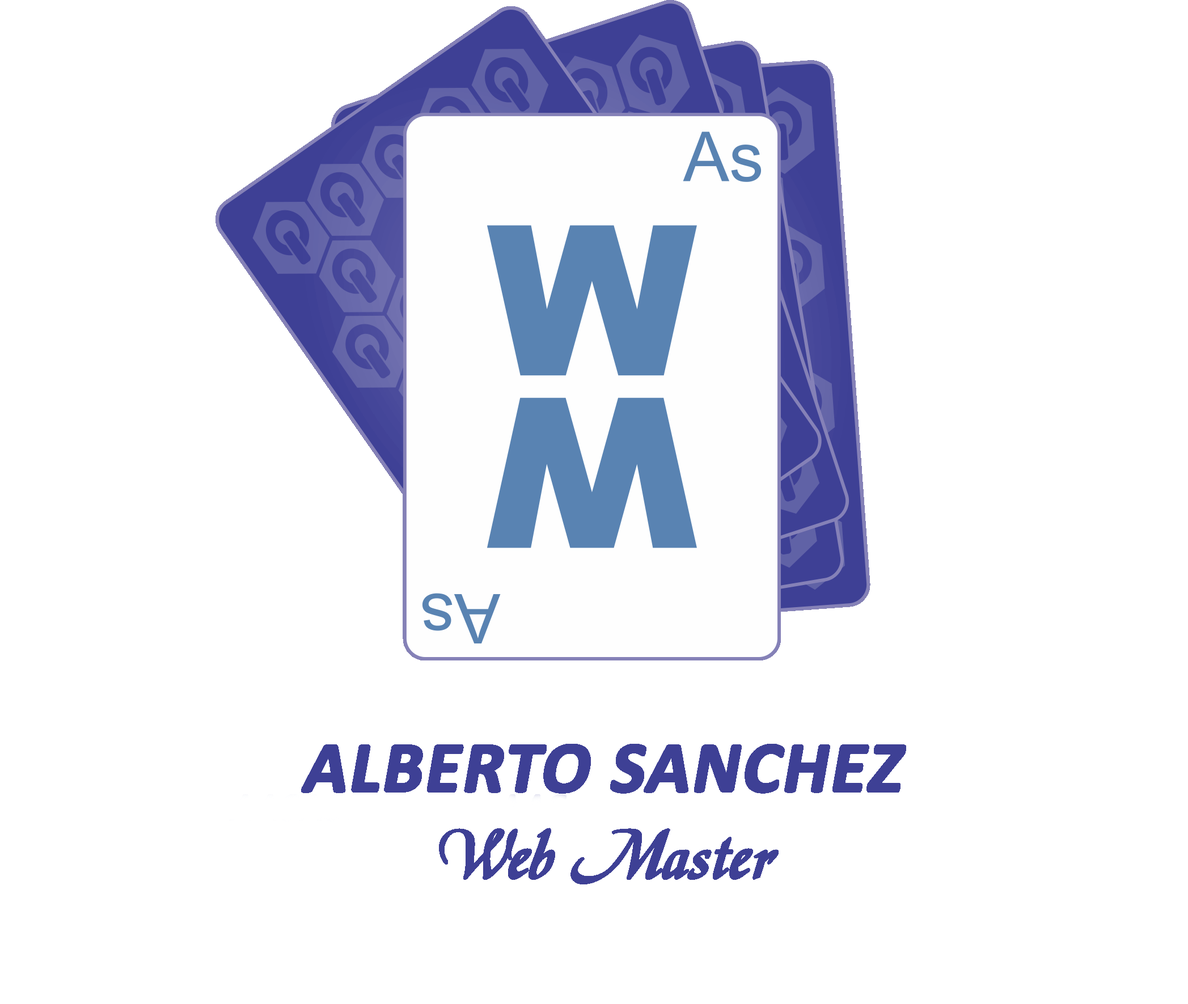
<style>
.page{position:relative;width:1188px;height:1004px;background:#ffffff}
.page>*{position:absolute;margin:0}
.t1{font:72.6px "Calibri-Bold";color:#3e4095;font-weight:bold;font-style:italic}
.t2{font:72.6px "Daniela";color:#3e4095;font-weight:bold;font-style:italic}
</style>
<div class="page">
<p class="t1" style="left:301px;top:744px;width:605px;height:140px;text-align:center">ALBERTO SANCHEZ<br><span class="t2">Web Master</span></p>
</div>
